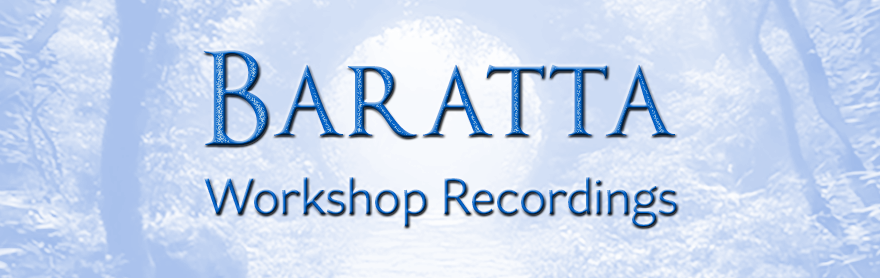
<style>
.page{position:relative;width:880px;height:278px}
.page>*{position:absolute;margin:0}
.t1{font:126.5px "OptimusPrinceps"}
.t2{font:50px "AsteriskSansVariable-Regular"}
</style>
<div class="page">
<p class="t1" style="left:203px;top:50px;width:472px;height:96px">Baratta</p>
<p class="t2" style="left:204px;top:177px;width:473px;height:50px">Workshop Recordings</p>
</div>
